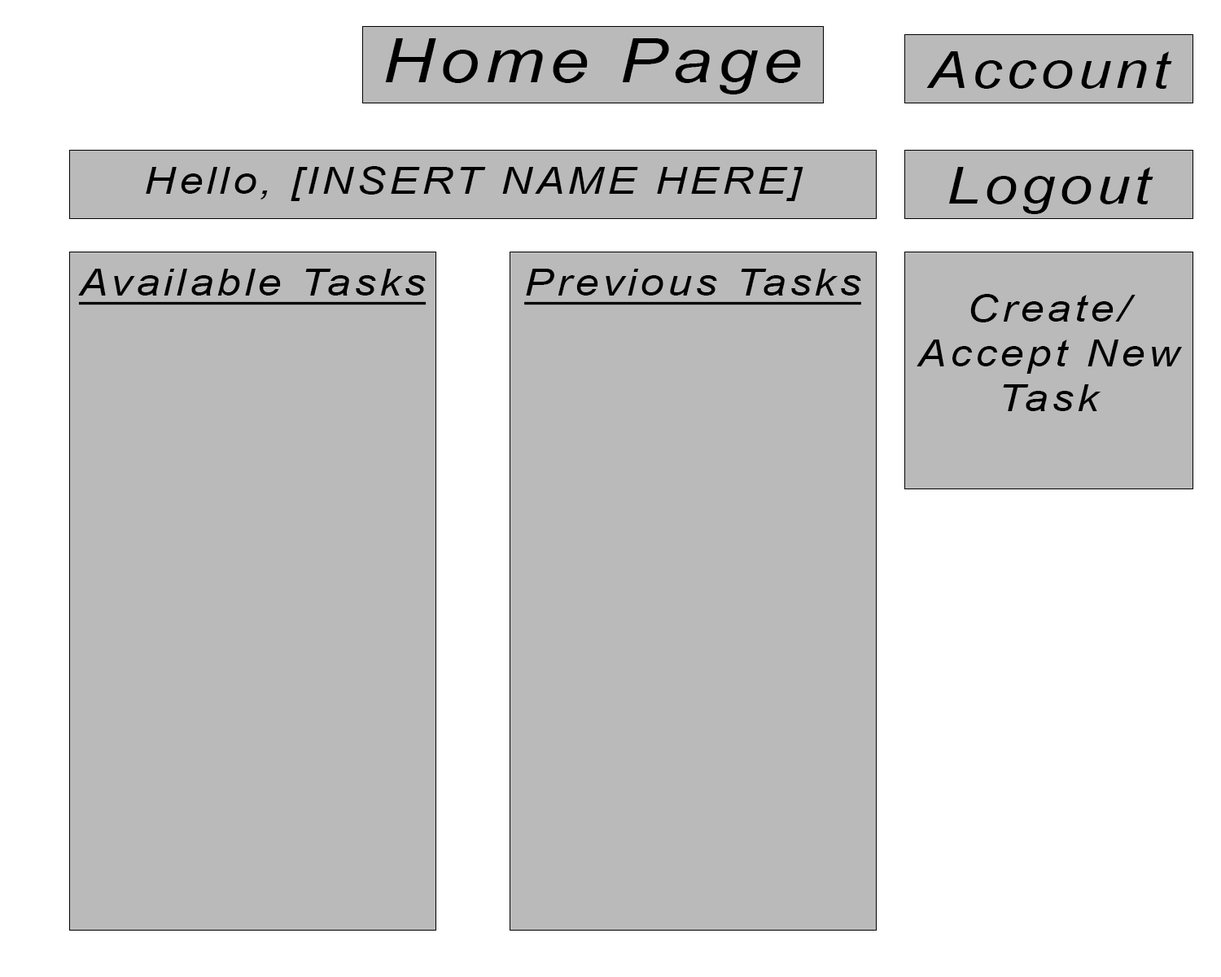
<style>
.page{position:relative;width:1221px;height:977px;background:#bababa}
.page>*{position:absolute;margin:0}
.t1{font:61px "Arial-ItalicMT";letter-spacing:0.08em;color:#000000;scale:1.16 1}
.t2{font:50.9px "Arial-ItalicMT";letter-spacing:0.08em;color:#000000;scale:1.16 1}
.t3{font:37.3px "Arial-ItalicMT";letter-spacing:0.08em;color:#000000;scale:1.16 1}
.t4{font:37.3px "Arial-ItalicMT";letter-spacing:0.08em;color:#000000;text-decoration:underline;scale:1.16 1}
</style>
<div class="page">
<p class="t1" style="left:385px;top:38px;width:416px;height:56px">Home Page</p>
<p class="t2" style="left:926px;top:51px;width:246px;height:38px">Account</p>
<p class="t3" style="left:146px;top:166px;width:657px;height:35px">Hello, [INSERT NAME HERE]</p>
<p class="t2" style="left:949px;top:167px;width:204px;height:47px">Logout</p>
<p class="t4" style="left:78px;top:269px;width:348px;height:36px">Available Tasks</p>
<p class="t4" style="left:524px;top:269px;width:337px;height:36px">Previous Tasks</p>
<p class="t3" style="left:916px;top:294px;width:266px;height:117px;text-align:center">Create/<br>Accept New Task</p>
</div>
